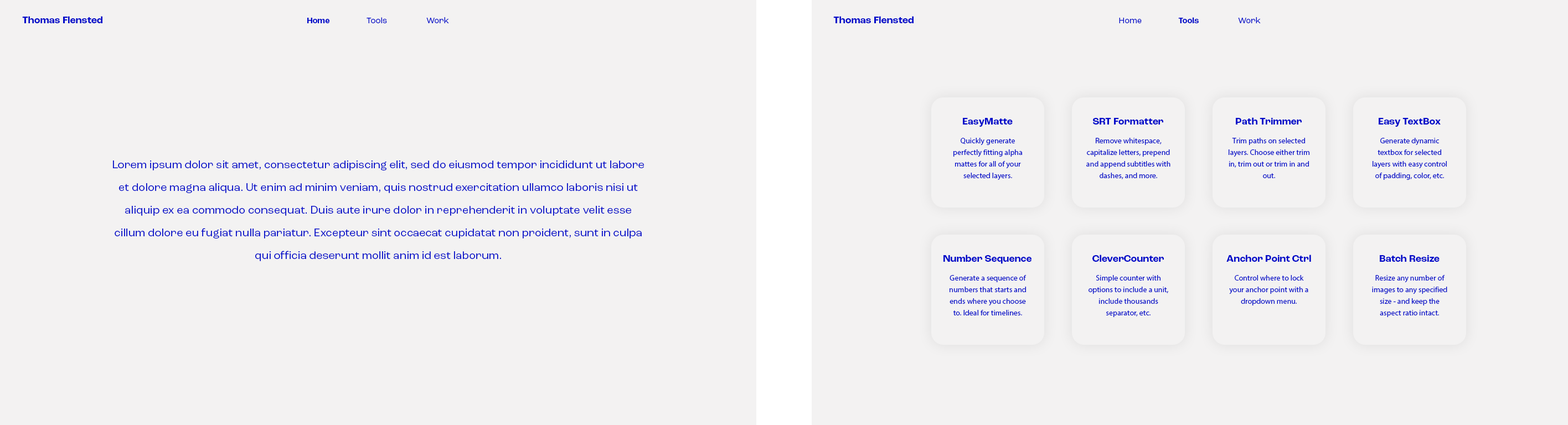
<style>
.page{position:relative;width:1568px;height:425px;background:#f3f2f2}
.page>*{position:absolute;margin:0}
.t1{font:10px "RocGrotesk-Bold";color:#0009c9}
.t2{font:8.3px "RocGrotesk-Regular";color:#0009c9}
.t3{font:8.3px "RocGrotesk-Bold";color:#0009c9}
.t4{font:7.8px/11.6px "MyriadPro-Regular";color:#0009c9}
.t5{font:11.1px/22.7px "RocGrotesk-Regular";color:#0009c9}
</style>
<div class="page">
<p class="t1" style="left:22px;top:16px;width:80px;height:7px">Thomas Flensted</p>
<p class="t2" style="left:307px;top:17px;width:142px;height:6px"><span class="t3">Home</span>  Tools  Work</p>
<p class="t1" style="left:833px;top:16px;width:81px;height:7px">Thomas Flensted</p>
<p class="t3" style="left:1119px;top:17px;width:142px;height:6px"><span class="t2">Home  </span>Tools<span class="t2">  Work</span></p>
<p class="t1" style="left:963px;top:118px;width:50px;height:9px">EasyMatte</p>
<p class="t1" style="left:1093px;top:118px;width:70px;height:7px">SRT Formatter</p>
<p class="t1" style="left:1236px;top:117px;width:66px;height:8px">Path Trimmer</p>
<p class="t1" style="left:1379px;top:118px;width:62px;height:9px">Easy TextBox</p>
<p class="t4" style="left:953px;top:138px;width:70px;height:42px;text-align:center">Quickly generate perfectly fitting alpha mattes for all of your selected layers.</p>
<p class="t4" style="left:1086px;top:138px;width:84px;height:41px;text-align:center">Remove whitespace, capitalize letters, prepend and append subtitles with dashes, and more.</p>
<p class="t4" style="left:1229px;top:138px;width:80px;height:40px;text-align:center">Trim paths on selected layers. Choose either trim in, trim out or trim in and out.</p>
<p class="t4" style="left:1373px;top:138px;width:74px;height:42px;text-align:center">Generate dynamic textbox for selected layers with easy control of padding, color, etc.</p>
<p class="t5" style="left:113px;top:161px;width:531px;height:100px;text-align:center">Lorem ipsum dolor sit amet, consectetur adipiscing elit, sed do eiusmod tempor incididunt ut labore et dolore magna aliqua. Ut enim ad minim veniam, quis nostrud exercitation ullamco laboris nisi ut aliquip ex ea commodo consequat. Duis aute irure dolor in reprehenderit in voluptate velit esse cillum dolore eu fugiat nulla pariatur. Excepteur sint occaecat cupidatat non proident, sunt in culpa qui officia deserunt mollit anim id est laborum.</p>
<p class="t1" style="left:943px;top:255px;width:88px;height:9px">Number Sequence</p>
<p class="t1" style="left:1092px;top:255px;width:72px;height:7px">CleverCounter</p>
<p class="t1" style="left:1226px;top:255px;width:85px;height:7px">Anchor Point Ctrl</p>
<p class="t1" style="left:1380px;top:255px;width:60px;height:7px">Batch Resize</p>
<p class="t4" style="left:950px;top:275px;width:77px;height:41px;text-align:center">Generate a sequence of numbers that starts and ends where you choose to. Ideal for timelines.</p>
<p class="t4" style="left:1089px;top:275px;width:79px;height:42px;text-align:center">Simple counter with options to include a unit, include thousands separator, etc.</p>
<p class="t4" style="left:1229px;top:275px;width:79px;height:31px;text-align:center">Control where to lock your anchor point with a dropdown menu.</p>
<p class="t4" style="left:1372px;top:275px;width:75px;height:42px;text-align:center">Resize any number of images to any specified size - and keep the aspect ratio intact.</p>
</div>
